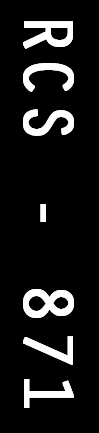
<style>
.page{position:relative;width:99px;height:433px;background:#000000}
.page>*{position:absolute;margin:0}
.t1{font:72px "OratorStd";color:#fffefe;font-weight:bold}
</style>
<div class="page">
<p class="t1" style="left:23px;top:21px;width:51px;height:387px;rotate:90deg">RCS - 871</p>
</div>
